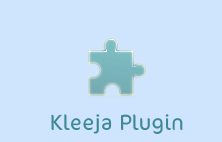
<style>
.page{position:relative;width:222px;height:142px;background:#cfe5fe}
.page>*{position:absolute;margin:0}
.t1{font:25px "CoconNextArabic-Light";color:#3f8992}
</style>
<div class="page">
<p class="t1" style="left:51px;top:114px;width:132px;height:20px">Kleeja Plugin</p>
</div>
